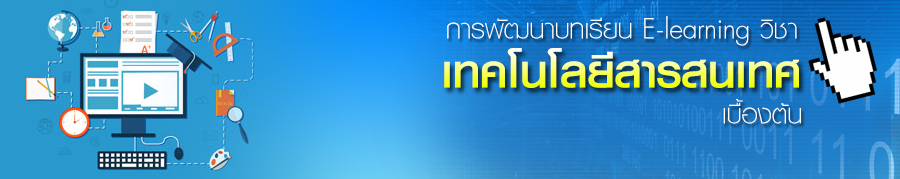
<style>
.page{position:relative;width:900px;height:179px}
.page>*{position:absolute;margin:0}
.t1{font:39.1px "PSLKittithada";color:#ffffff}
.t2{font:64.4px "PSLKandaModernExtraSP"}
</style>
<div class="page">
<p class="t1" style="left:447px;top:16px;width:350px;height:30px">การพัฒนาบทเรียน E-learning วิชา</p>
<p class="t2" style="left:444px;top:48px;width:355px;height:40px">เทคโนโลยีสารสนเทศ</p>
<p class="t1" style="left:723px;top:99px;width:78px;height:25px">เบื้องต้น</p>
</div>
